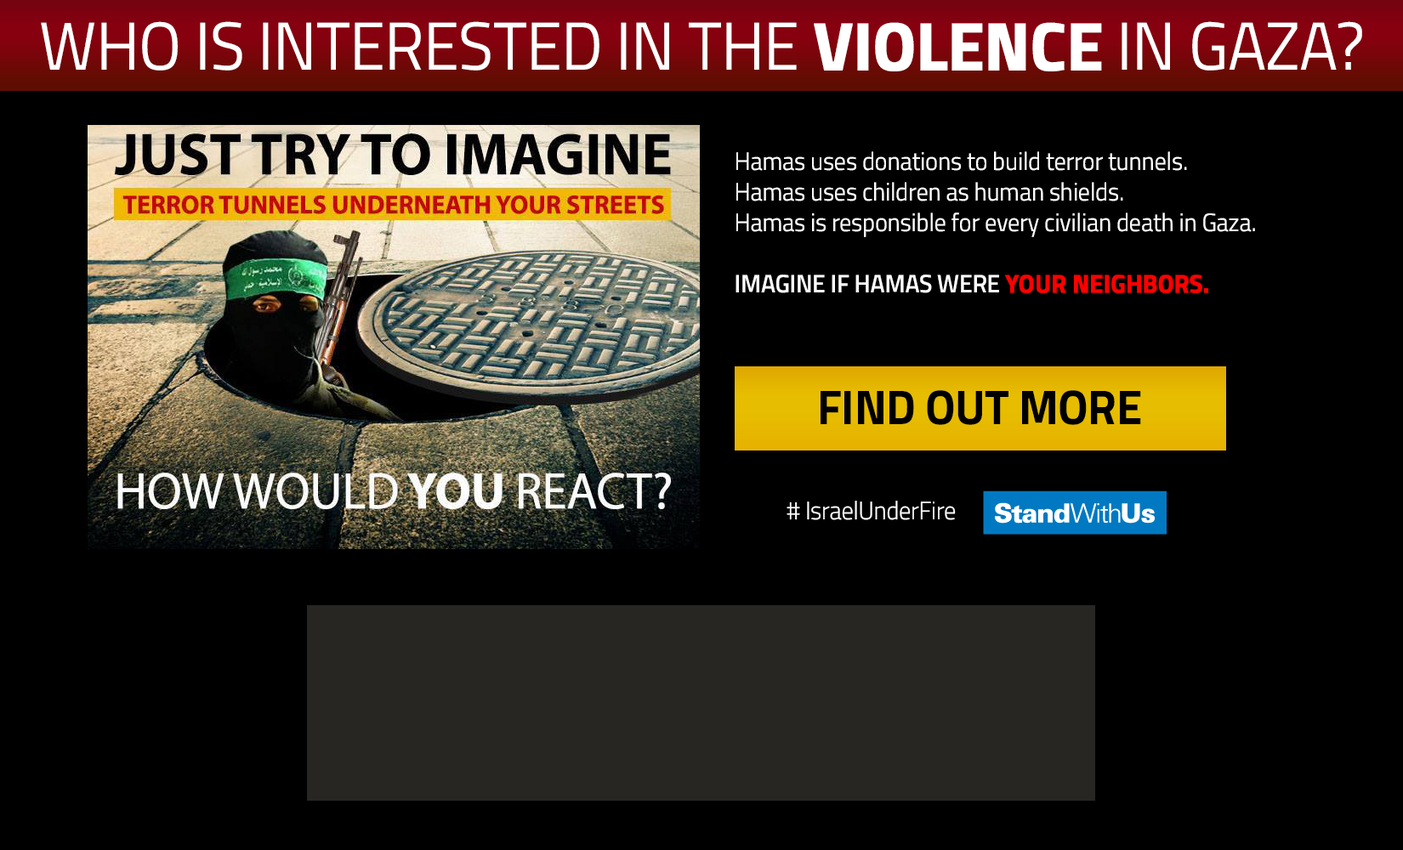
<style>
.page{position:relative;width:1403px;height:850px;background:#000000}
.page>*{position:absolute;margin:0}
.t1{font:68px "TitilliumWeb-Regular";letter-spacing:-0.01em;color:#ffffff;text-transform:uppercase;scale:0.95 1}
.t2{font:68px "TitilliumWeb-Bold";letter-spacing:-0.01em;color:#ffffff;text-transform:uppercase;font-weight:bold;scale:0.95 1}
.t3{font:25.5px "TitilliumWeb-Regular";letter-spacing:-0.01em;color:#ffffff;scale:0.95 1}
.t4{font:25.5px "TitilliumWeb-SemiBold";letter-spacing:-0.01em;color:#ffffff;text-transform:uppercase;scale:0.95 1}
.t5{font:25.5px "TitilliumWeb-Bold";letter-spacing:-0.01em;color:#ff0000;text-transform:uppercase;font-weight:bold;scale:0.95 1}
.t6{font:49px "TitilliumWeb-Bold";letter-spacing:-0.01em;color:#000000;text-transform:uppercase;scale:0.95 1}
.t7{font:25.5px "TitilliumWeb-Light";letter-spacing:-0.01em;color:#ffffff;scale:0.95 1}
</style>
<div class="page">
<p class="t1" style="left:41px;top:21px;width:1321px;height:50px">Who is interested in the <span class="t2">VIOLENCE </span>in Gaza?</p>
<p class="t3" style="left:735px;top:151px;width:520px;height:142px">Hamas uses donations to build terror tunnels.<br>Hamas uses children as human shields.<br>Hamas is responsible for every civilian death in Gaza.<br><br><span class="t4">Imagine if Hamas were </span><span class="t5">your neighbors.</span></p>
<p class="t6" style="left:820px;top:390px;width:321px;height:35px">find out more</p>
<p class="t7" style="left:786px;top:501px;width:170px;height:19px"># IsraelUnderFire</p>
</div>
